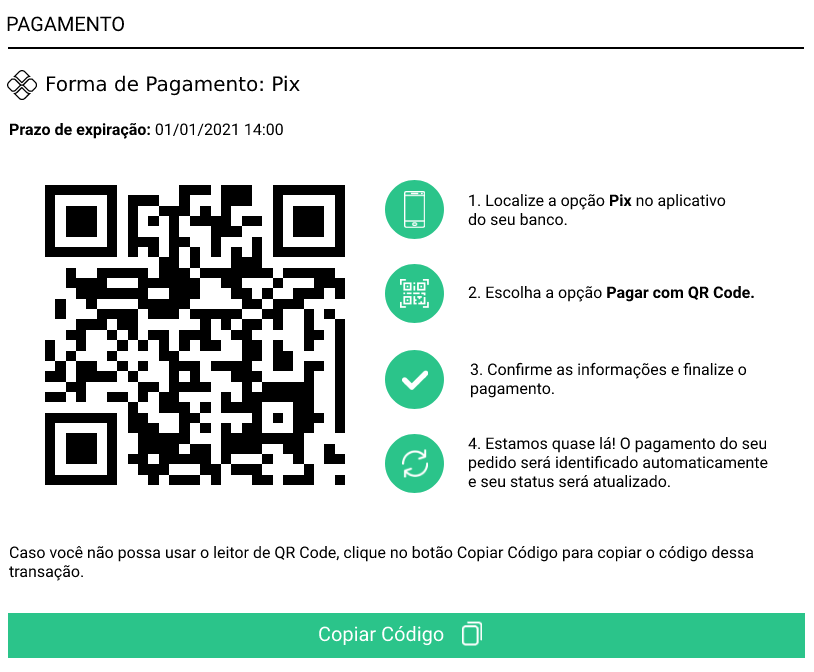
<style>
.page{position:relative;width:814px;height:672px;background:#ffffff}
.page>*{position:absolute;margin:0}
.t1{font:20px "Roboto-Regular";color:#000000}
.t2{font:20px "DejaVuSans";color:#000000}
.t3{font:16px "Roboto-Bold";color:#000000}
.t4{font:16px "Roboto-Regular";color:#000000}
.t5{font:20px "Roboto-Regular";color:#ffffff}
</style>
<div class="page">
<p class="t1" style="left:7px;top:16px;width:117px;height:16px">PAGAMENTO</p>
<p class="t2" style="left:46px;top:75px;width:254px;height:21px">Forma de Pagamento: Pix</p>
<p class="t3" style="left:10px;top:123px;width:273px;height:16px">Prazo de expiração: <span class="t4">01/01/2021 14:00</span></p>
<p class="t4" style="left:468px;top:194px;width:258px;height:32px">1. Localize a opção <span class="t3">Pix </span>no aplicativo <br>do seu banco.</p>
<p class="t4" style="left:468px;top:286px;width:286px;height:16px">2. Escolha a opção <span class="t3">Pagar com QR Code.</span></p>
<p class="t4" style="left:470px;top:362px;width:277px;height:36px">3. Confirme as informações e finalize o <br>pagamento.</p>
<p class="t4" style="left:468px;top:437px;width:300px;height:51px">4. Estamos quase lá! O pagamento do seu<br>pedido será identificado automaticamente <br>e seu status será atualizado.</p>
<p class="t4" style="left:9px;top:546px;width:745px;height:35px">Caso você não possa usar o leitor de QR Code, clique no botão Copiar Código para copiar o código dessa <br>transação.</p>
<p class="t5" style="left:319px;top:626px;width:125px;height:20px">Copiar Código</p>
</div>
